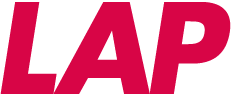
<style>
.page{position:relative;width:233px;height:95px;background:#d80546}
.page>*{position:absolute;margin:0}
.t1{font:122px "FuturaStd-BoldOblique";color:#d80546}
</style>
<div class="page">
<p class="t1" style="left:0px;top:2px;width:231px;height:92px">LAP</p>
</div>
